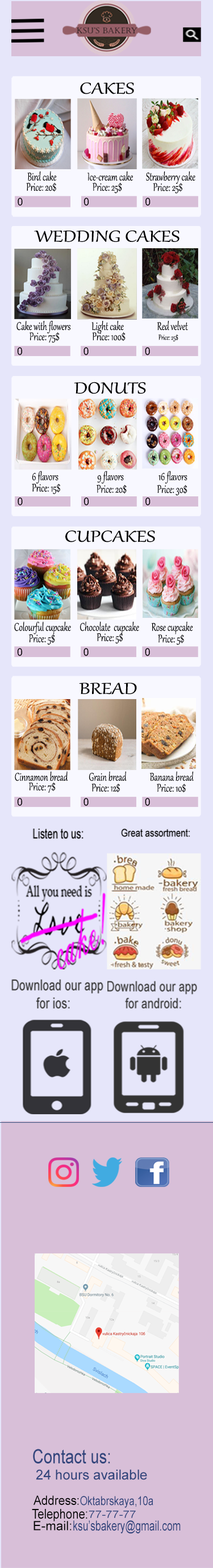
<style>
.page{position:relative;width:213px;height:1568px;background:#d8bfd8}
.page>*{position:absolute;margin:0}
.t1{font:19.5px "Gabriola";color:#000000;scale:1.27 1}
.t2{font:13.6px "Gabriola";color:#000000;scale:0.74 1}
.t3{font:9.1px "Gabriola";color:#000000;scale:0.74 1}
.t4{font:19.5px "ArialMT";color:#33467d;scale:0.8 1}
.t5{font:13.7px "ArialMT";color:#33467d}
.t6{font:13px "ArialMT";color:#050505;scale:0.91 1}
.t7{font:12.3px "ArialMT";color:#33467d;scale:0.79 1}
.t8{font:13.4px "ArialMT";color:#050505;scale:0.86 1}
.t9{font:10.3px "ArialMT";color:#33467d;scale:1.16 1}
.t10{font:12.8px "ArialMT";color:#050505}
.t11{font:13.9px "ArialMT";color:#33467d;scale:0.72 1}
</style>
<div class="page">
<p class="t1" style="left:80px;top:82px;width:54px;height:12px">CAKES</p>
<p class="t2" style="left:27px;top:171px;width:29px;height:10px">Bird cake</p>
<p class="t2" style="left:87px;top:171px;width:46px;height:10px">Ice-cream cake</p>
<p class="t2" style="left:146px;top:171px;width:49px;height:13px">Strawberry cake</p>
<p class="t2" style="left:26px;top:182px;width:30px;height:10px">Price: 20$</p>
<p class="t2" style="left:93px;top:182px;width:29px;height:12px">Price: 25$</p>
<p class="t2" style="left:153px;top:183px;width:29px;height:11px">Price: 25$</p>
<p class="t1" style="left:34px;top:230px;width:145px;height:12px">WEDDING CAKES</p>
<p class="t2" style="left:16px;top:320px;width:54px;height:13px">Cake with flowers</p>
<p class="t2" style="left:91px;top:320px;width:33px;height:13px">Light cake</p>
<p class="t2" style="left:157px;top:320px;width:31px;height:11px">Red velvet</p>
<p class="t2" style="left:29px;top:332px;width:31px;height:11px">Price: 75$</p>
<p class="t2" style="left:92px;top:332px;width:34px;height:9px">Price: 100$</p>
<p class="t3" style="left:158px;top:334px;width:20px;height:8px">Price: 25$</p>
<p class="t1" style="left:74px;top:382px;width:72px;height:12px">DONUTS</p>
<p class="t2" style="left:32px;top:471px;width:26px;height:13px">6 flavors</p>
<p class="t2" style="left:97px;top:471px;width:27px;height:13px">9 flavors</p>
<p class="t2" style="left:158px;top:471px;width:29px;height:13px">16 flavors</p>
<p class="t2" style="left:32px;top:483px;width:28px;height:11px">Price: 15$</p>
<p class="t2" style="left:97px;top:484px;width:30px;height:10px">Price: 20$</p>
<p class="t2" style="left:157px;top:484px;width:30px;height:12px">Price: 30$</p>
<p class="t1" style="left:65px;top:530px;width:90px;height:12px">CUPCAKES</p>
<p class="t2" style="left:14px;top:621px;width:57px;height:13px">Colourful cupcake</p>
<p class="t2" style="left:80px;top:621px;width:59px;height:13px">Chocolate  cupcake</p>
<p class="t2" style="left:151px;top:621px;width:42px;height:13px">Rose cupcake</p>
<p class="t2" style="left:28px;top:634px;width:27px;height:11px">Price: 5$</p>
<p class="t2" style="left:97px;top:633px;width:26px;height:11px">Price: 5$</p>
<p class="t2" style="left:158px;top:634px;width:26px;height:11px">Price: 5$</p>
<p class="t1" style="left:79px;top:683px;width:58px;height:12px">BREAD</p>
<p class="t2" style="left:15px;top:771px;width:53px;height:10px">Cinnamon bread</p>
<p class="t2" style="left:89px;top:771px;width:38px;height:10px">Grain bread</p>
<p class="t2" style="left:149px;top:771px;width:45px;height:10px">Banana bread</p>
<p class="t2" style="left:28px;top:782px;width:28px;height:11px">Price: 7$</p>
<p class="t2" style="left:91px;top:783px;width:29px;height:10px">Price: 12$</p>
<p class="t2" style="left:157px;top:783px;width:29px;height:10px">Price: 10$</p>
<p class="t4" style="left:33px;top:1449px;width:77px;height:15px">Contact us:</p>
<p class="t5" style="left:36px;top:1469px;width:111px;height:11px">24 hours available</p>
<p class="t6" style="left:34px;top:1495px;width:45px;height:10px">Address:</p>
<p class="t7" style="left:80px;top:1496px;width:73px;height:12px">Oktabrskaya,10a</p>
<p class="t8" style="left:32px;top:1509px;width:55px;height:12px">Telephone:</p>
<p class="t9" style="left:89px;top:1511px;width:47px;height:7px">77-77-77</p>
<p class="t10" style="left:34px;top:1521px;width:38px;height:10px">E-mail:</p>
<p class="t11" style="left:73px;top:1520px;width:108px;height:14px">ksu’sbakery@gmail.com</p>
</div>
